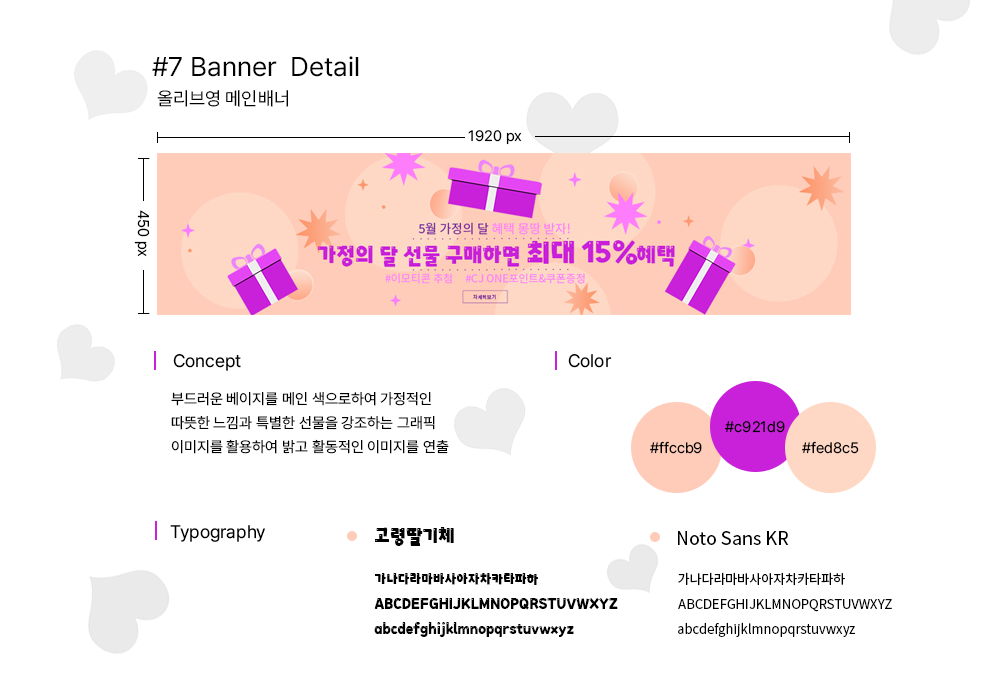
<style>
.page{position:relative;width:1000px;height:700px;background:#ffffff}
.page>*{position:absolute;margin:0}
.t1{font:27px "Pretendard-Regular";color:#000000}
.t2{font:18.7px "Pretendard-Regular";color:#000000}
.t3{font:15px "Pretendard-Regular";color:#000000}
.t4{font:15.4px "Pretendard-Regular";color:#000000}
.t5{font:18px "Pretendard-Regular";color:#000000}
.t6{font:15px/24px "Pretendard-Regular";color:#000000}
.t7{font:18px "Goryeong-Strawberry";color:#000000}
.t8{font:18px "NotoSansKR-Regular";color:#000000}
.t9{font:13px "Goryeong-Strawberry";color:#000000}
.t10{font:13px "NotoSansKR-Regular";color:#000000}
</style>
<div class="page">
<p class="t1" style="left:152px;top:56px;width:207px;height:21px">#7 Banner  Detail</p>
<p class="t2" style="left:157px;top:90px;width:131px;height:17px">올리브영 메인배너</p>
<p class="t3" style="left:468px;top:130px;width:54px;height:15px">1920 px</p>
<p class="t4" style="left:134px;top:210px;width:16px;height:47px;rotate:90deg">450 px</p>
<p class="t5" style="left:173px;top:354px;width:68px;height:17px">Concept</p>
<p class="t5" style="left:568px;top:354px;width:44px;height:14px">Color</p>
<p class="t6" style="left:171px;top:392px;width:278px;height:62px">부드러운 베이지를 메인 색으로하여 가정적인 <br>따뜻한 느낌과 특별한 선물을 강조하는 그래픽<br>이미지를 활용하여 밝고 활동적인 이미지를 연출</p>
<p class="t3" style="left:725px;top:421px;width:60px;height:12px">#c921d9</p>
<p class="t3" style="left:650px;top:441px;width:52px;height:13px">#ffccb9</p>
<p class="t3" style="left:802px;top:441px;width:57px;height:13px">#fed8c5</p>
<p class="t5" style="left:170px;top:525px;width:96px;height:17px">Typography</p>
<p class="t7" style="left:375px;top:527px;width:79px;height:19px">고령딸기체</p>
<p class="t8" style="left:678px;top:531px;width:111px;height:14px">Noto Sans KR</p>
<p class="t9" style="left:374px;top:573px;width:164px;height:12px">가나다라마바사아자차카타파하</p>
<p class="t10" style="left:678px;top:572px;width:167px;height:14px">가나다라마바사아자차카타파하</p>
<p class="t9" style="left:374px;top:598px;width:244px;height:12px">ABCDEFGHIJKLMNOPQRSTUVWXYZ</p>
<p class="t10" style="left:678px;top:599px;width:214px;height:13px">ABCDEFGHIJKLMNOPQRSTUVWXYZ</p>
<p class="t9" style="left:374px;top:622px;width:200px;height:15px">abcdefghijklmnopqrstuvwxyz</p>
<p class="t10" style="left:678px;top:622px;width:177px;height:15px">abcdefghijklmnopqrstuvwxyz</p>
</div>
